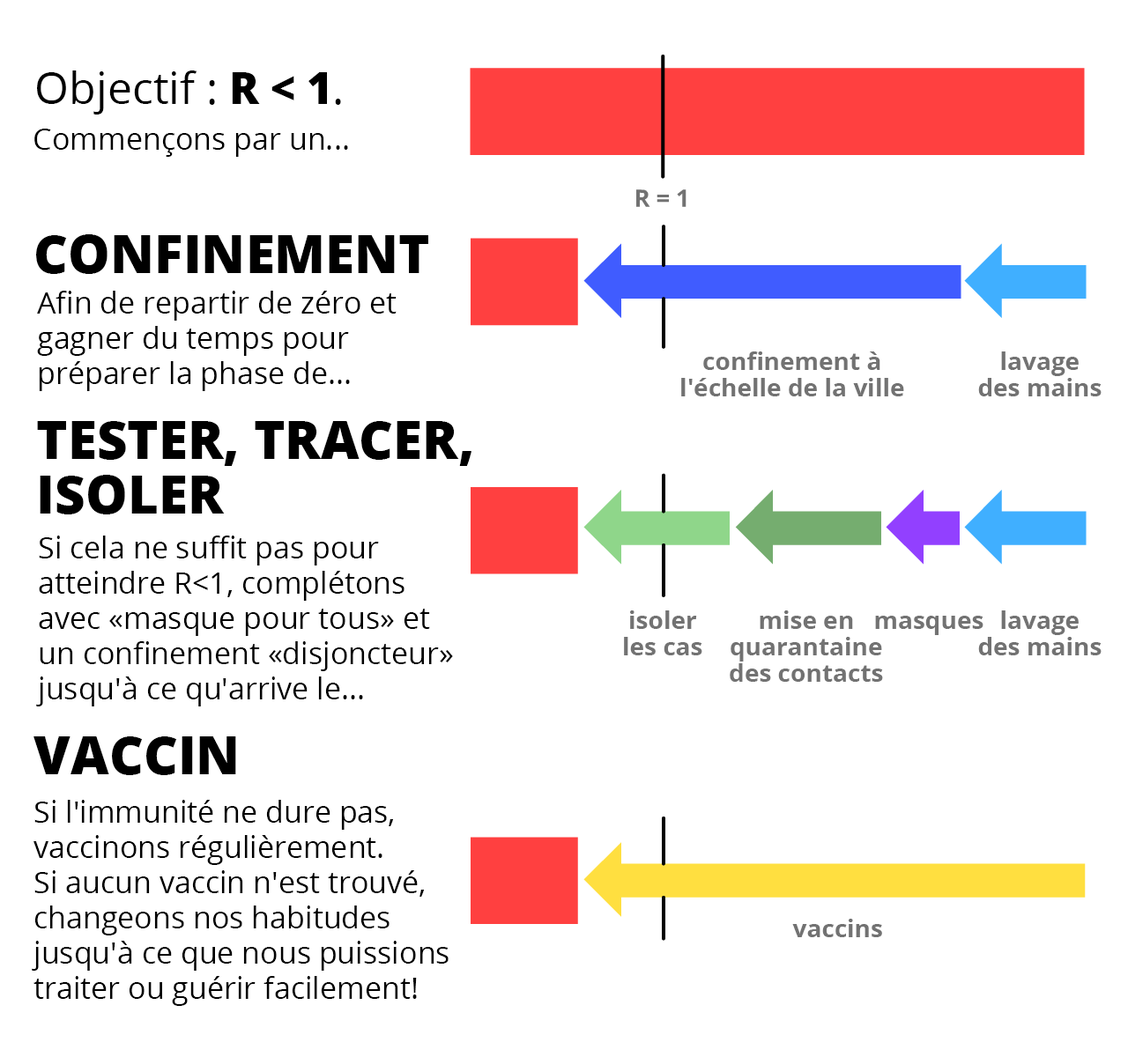
<style>
.page{position:relative;width:1128px;height:1057px;background:#ffffff}
.page>*{position:absolute;margin:0}
.t1{font:44.1px "OpenSans-Regular";color:#000000}
.t2{font:44.1px "OpenSans-ExtraBold";color:#000000}
.t3{font:30px "OpenSans-Regular";color:#000000}
.t4{font:52.9px "OpenSans-ExtraBold";color:#000000}
.t5{font:30px/35.2px "OpenSans-Regular";color:#000000}
.t6{font:24.7px/26.4px "OpenSans-Bold";color:#727272}
.t7{font:52.9px/54.6px "OpenSans-ExtraBold";color:#000000}
.t8{font:24.7px "OpenSans-Bold";color:#727272}
</style>
<div class="page">
<p class="t1" style="left:37px;top:70px;width:304px;height:45px">Objectif : <span class="t2">R &lt; 1</span>.</p>
<p class="t3" style="left:34px;top:129px;width:314px;height:28px">Commençons par un...</p>
<p class="t4" style="left:36px;top:234px;width:392px;height:40px">CONFINEMENT</p>
<p class="t5" style="left:37px;top:291px;width:359px;height:100px">Afin de repartir de zéro et<br>gagner du temps pour<br>préparer la phase de...</p>
<p class="t6" style="left:681px;top:352px;width:223px;height:44px;text-align:center">confinement à<br>l'échelle de la ville</p>
<p class="t6" style="left:978px;top:352px;width:123px;height:44px;text-align:center">lavage<br>des mains</p>
<p class="t7" style="left:37px;top:421px;width:434px;height:94px">TESTER, TRACER,<br>ISOLER</p>
<p class="t5" style="left:36px;top:536px;width:417px;height:171px">Si cela ne suffit pas pour<br>atteindre R&lt;1, complétons<br>avec «masque pour tous» et<br>un confinement «disjoncteur»<br>jusqu'à ce qu'arrive le...</p>
<p class="t6" style="left:624px;top:611px;width:78px;height:45px;text-align:center">isoler<br>les cas</p>
<p class="t6" style="left:730px;top:611px;width:153px;height:71px;text-align:center">mise en<br>quarantaine<br>des contacts</p>
<p class="t8" style="left:875px;top:616px;width:108px;height:19px">masques</p>
<p class="t6" style="left:978px;top:611px;width:123px;height:45px;text-align:center">lavage<br>des mains</p>
<p class="t4" style="left:33px;top:737px;width:203px;height:38px">VACCIN</p>
<p class="t5" style="left:32px;top:800px;width:416px;height:206px">Si l'immunité ne dure pas,<br>vaccinons régulièrement.<br>Si aucun vaccin n'est trouvé,<br>changeons nos habitudes<br>jusqu'à ce que nous puissions<br>traiter ou guérir facilement!</p>
<p class="t8" style="left:792px;top:919px;width:90px;height:18px">vaccins</p>
</div>
